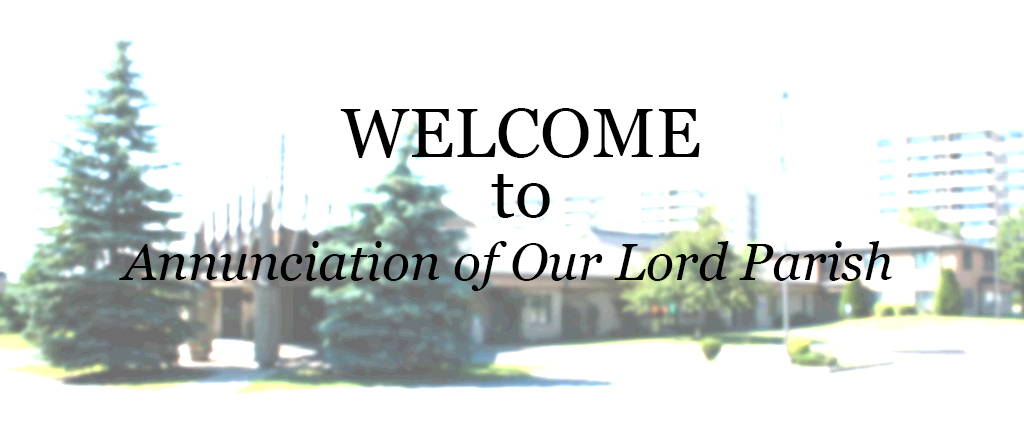
<style>
.page{position:relative;width:1024px;height:424px;background:#ffffff}
.page>*{position:absolute;margin:0}
.t1{font:69.3px "Georgia";color:#000000}
.t2{font:52px "Georgia-Italic";color:#000000}
.t3{font:52px "Georgia";color:#000000}
</style>
<div class="page">
<p class="t1" style="left:340px;top:108px;width:360px;height:50px">WELCOME</p>
<p class="t1" style="left:491px;top:174px;width:59px;height:44px">to</p>
<p class="t2" style="left:119px;top:241px;width:773px;height:50px"><span class="t3"><br></span>Annunciation of Our Lord Parish</p>
</div>
